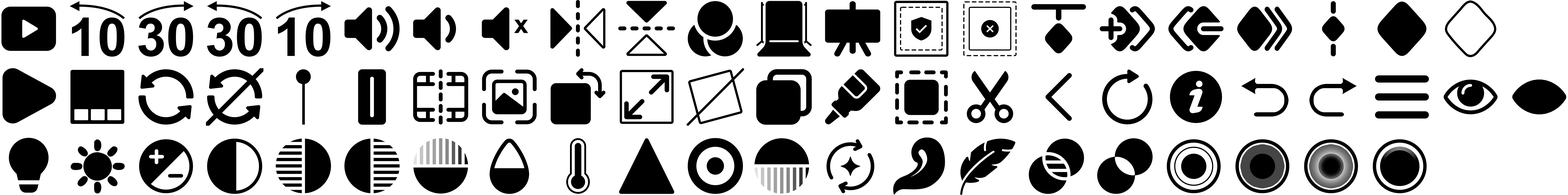
<style>
.page{position:relative;width:1568px;height:195px;background:#ffffff}
.page>*{position:absolute;margin:0}
.t1{font:53.3px "Arial-BoldMT";color:#000000}
.t2{font:25.7px "Arial-BoldMT";color:#000000}
</style>
<div class="page">
<p class="t1" style="left:72px;top:18px;width:52px;height:39px">10</p>
<p class="t1" style="left:138px;top:18px;width:55px;height:39px">30</p>
<p class="t1" style="left:207px;top:18px;width:55px;height:39px">30</p>
<p class="t1" style="left:278px;top:18px;width:52px;height:39px">10</p>
<p class="t2" style="left:514px;top:20px;width:14px;height:13px">x</p>
</div>
